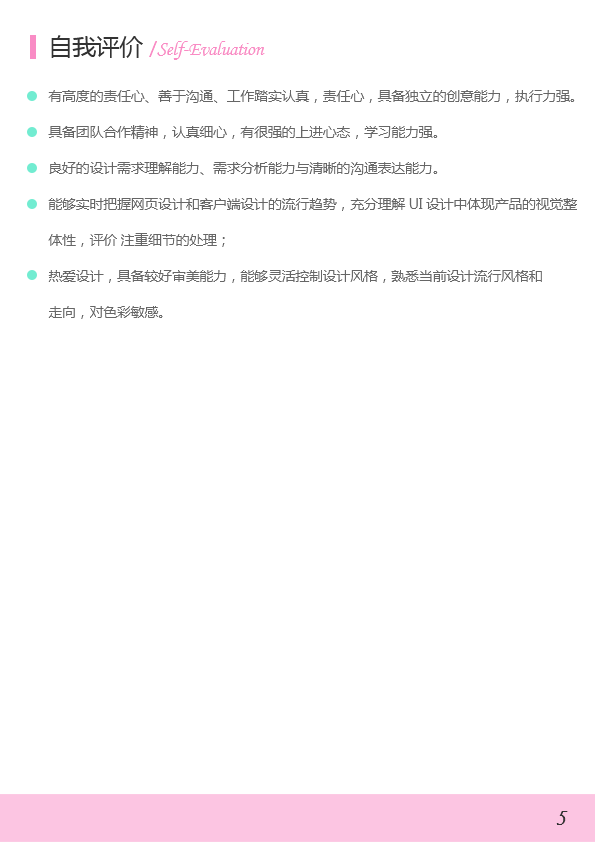
<style>
.page{position:relative;width:595px;height:842px;background:#ffffff}
.page>*{position:absolute;margin:0}
.t1{font:20px "STLiti";letter-spacing:-0.02em;color:#f98cc5}
.t2{font:24px "MicrosoftYaHei";letter-spacing:-0.02em;color:#333333}
.t3{font:18px "MicrosoftYaHei";letter-spacing:-0.02em;color:#f98cc5}
.t4{font:14px/36px "MicrosoftYaHei";letter-spacing:-0.02em;color:#666666}
.t5{font:18px "Freehand521BT-RegularC";letter-spacing:-0.02em;color:#333333}
</style>
<div class="page">
<p class="t1" style="left:51px;top:35px;width:214px;height:25px"><span class="t2">自我评价 </span><span class="t3">/</span>Self-Evaluation</p>
<p class="t4" style="left:48px;top:90px;width:529px;height:229px">有高度的责任心、善于沟通、工作踏实认真，责任心，具备独立的创意能力，执行力强。<br>具备团队合作精神，认真细心，有很强的上进心态，学习能力强。<br>良好的设计需求理解能力、需求分析能力与清晰的沟通表达能力。<br>能够实时把握网页设计和客户端设计的流行趋势，充分理解 UI 设计中体现产品的视觉整<br>体性，评价 注重细节的处理；<br>热爱设计，具备较好审美能力，能够灵活控制设计风格，熟悉当前设计流行风格和<br>走向，对色彩敏感。</p>
<p class="t5" style="left:556px;top:811px;width:12px;height:14px">5</p>
</div>
